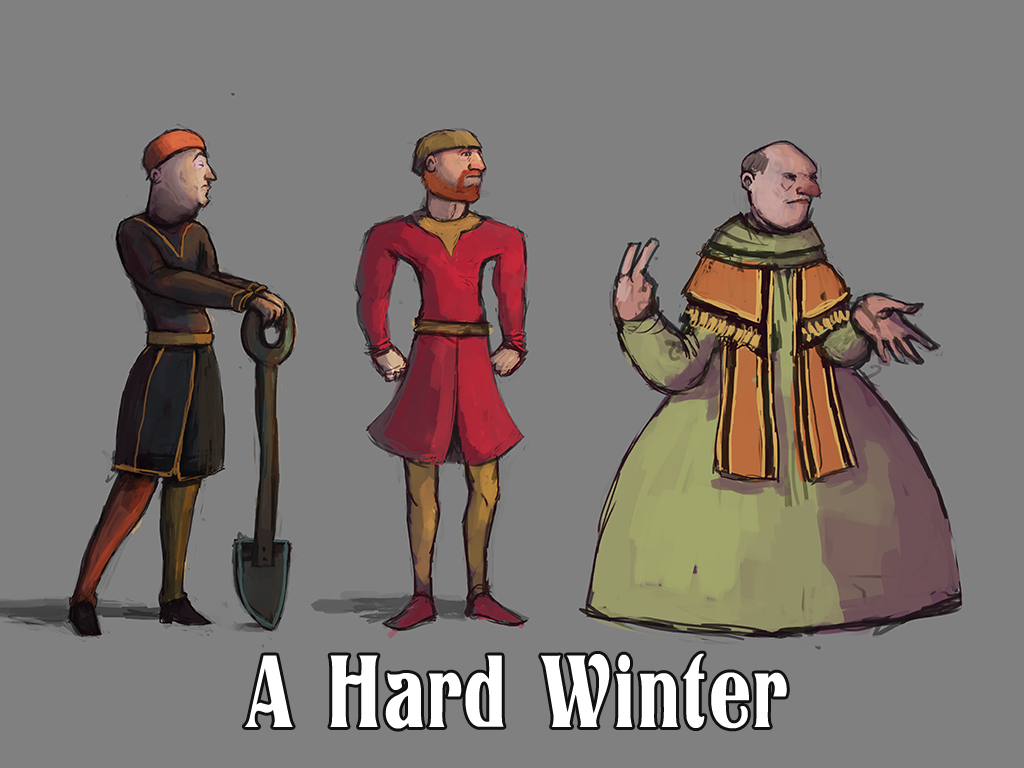
<style>
.page{position:relative;width:1024px;height:768px;background:#808080}
.page>*{position:absolute;margin:0}
.t1{font:108px "Titania";letter-spacing:0.025em;color:#ffffff;scale:0.7 1}
</style>
<div class="page">
<p class="t1" style="left:244px;top:653px;width:543px;height:76px">A Hard Winter</p>
</div>
